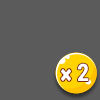
<style>
.page{position:relative;width:100px;height:100px;background:#5b5b5b}
.page>*{position:absolute;margin:0}
.t1{font:24px "RobotoCondensed-Bold";color:#ffffff}
</style>
<div class="page">
<p class="t1" style="left:77px;top:63px;width:12px;height:18px">2</p>
</div>
